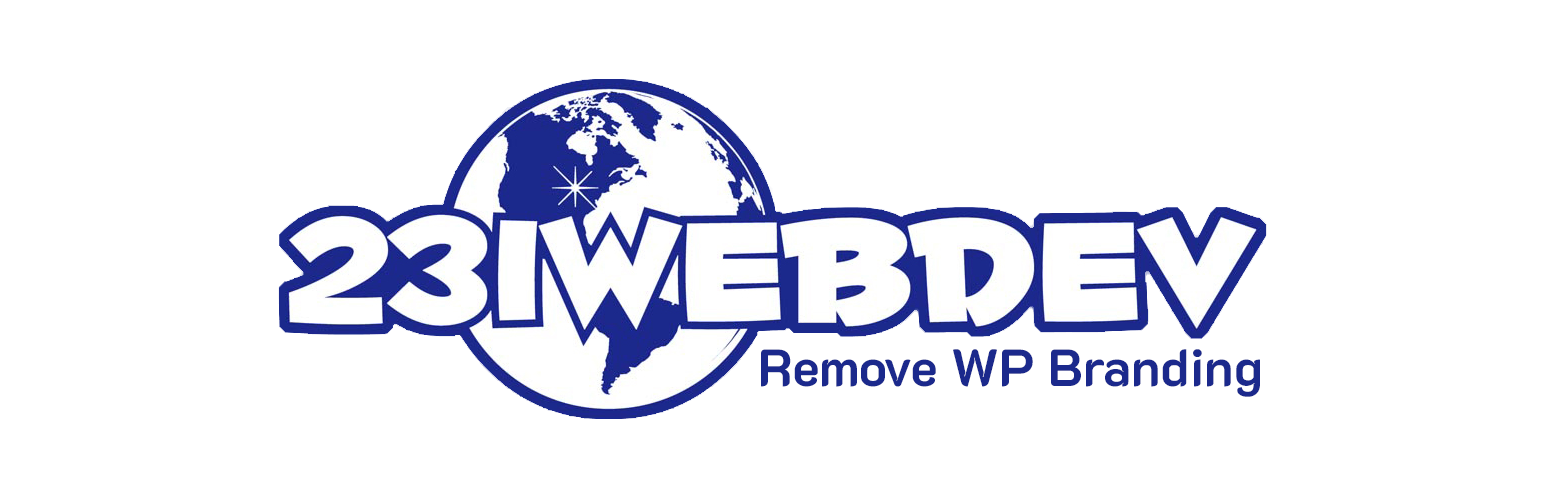
<style>
.page{position:relative;width:1544px;height:500px;background:#ffffff}
.page>*{position:absolute;margin:0}
.t1{font:52px "K2D-Bold";color:#1b298c}
</style>
<div class="page">
<p class="t1" style="left:761px;top:349px;width:499px;height:48px">Remove WP Branding</p>
</div>
